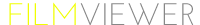
<style>
.page{position:relative;width:200px;height:25px;background:#ffffff}
.page>*{position:absolute;margin:0}
.t1{font:31px "JosefinSansStd-Light";color:#878787}
.t2{font:31px "JosefinSansStd-Light";color:#f0ff00}
</style>
<div class="page">
<p class="t1" style="left:9px;top:2px;width:185px;height:24px"><span class="t2">FILM</span>VIEWER</p>
</div>
